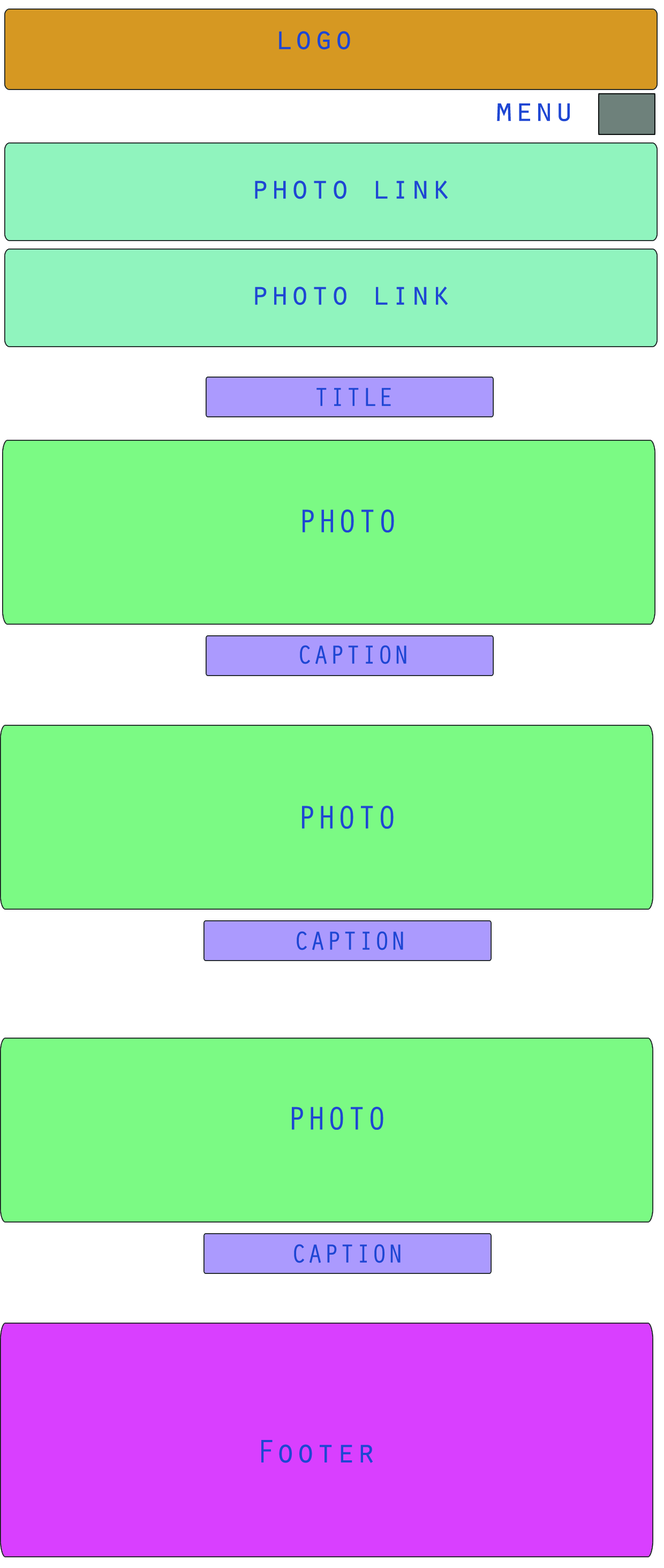
<style>
.page{position:relative;width:664px;height:1568px;background:#7bfa84}
.page>*{position:absolute;margin:0}
.t1{font:33.5px "OratorStd";color:#1e47d3}
.t2{font:26.8px "OratorStd";color:#1e47d3}
</style>
<div class="page">
<p class="t1" style="left:279px;top:31px;width:71px;height:19px">logo</p>
<p class="t1" style="left:497px;top:103px;width:73px;height:19px">menu</p>
<p class="t1" style="left:255px;top:181px;width:193px;height:18px">photo link</p>
<p class="t1" style="left:255px;top:287px;width:193px;height:18px">photo link</p>
<p class="t2" style="left:317px;top:388px;width:74px;height:18px">TITLE</p>
<p class="t1" style="left:303px;top:509px;width:91px;height:23px">PHOTO</p>
<p class="t2" style="left:300px;top:645px;width:107px;height:19px">CAPTION</p>
<p class="t1" style="left:302px;top:806px;width:92px;height:23px">PHOTO</p>
<p class="t2" style="left:297px;top:931px;width:106px;height:19px">CAPTION</p>
<p class="t1" style="left:292px;top:1107px;width:92px;height:23px">PHOTO</p>
<p class="t2" style="left:294px;top:1244px;width:107px;height:19px">CAPTION</p>
<p class="t1" style="left:261px;top:1440px;width:112px;height:23px">Footer</p>
</div>
